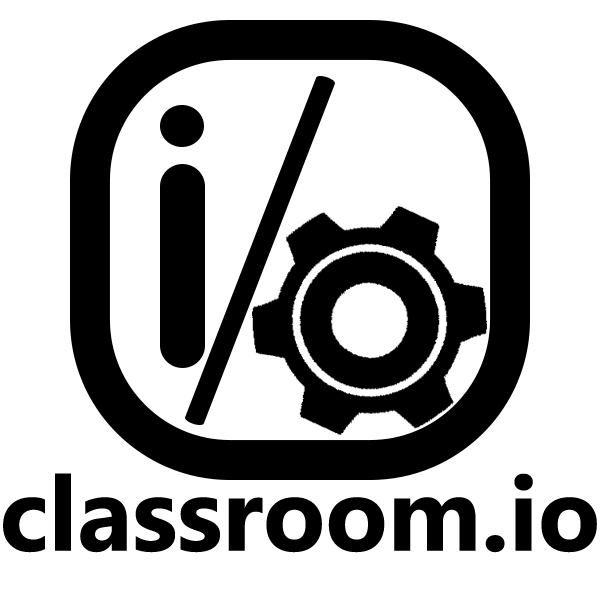
<style>
.page{position:relative;width:600px;height:600px;background:#ffffff}
.page>*{position:absolute;margin:0}
.t1{font:104.2px "MicrosoftPhagsPa-Bold";color:#000000}
</style>
<div class="page">
<p class="t1" style="left:3px;top:473px;width:594px;height:80px">classroom.io</p>
</div>
